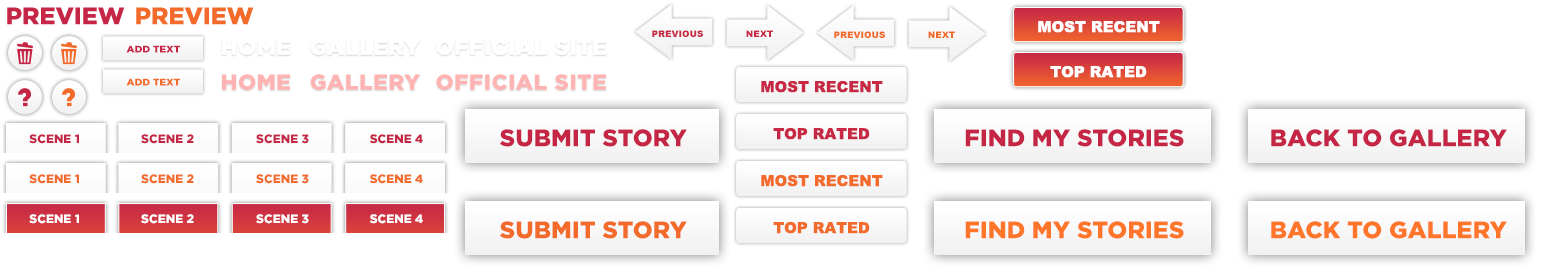
<style>
.page{position:relative;width:1550px;height:275px;background:#ffffff}
.page>*{position:absolute;margin:0}
.t1{font:23.8px "Gotham-Black";color:#c52646}
.t2{font:23.8px "Gotham-Black";color:#f36b2b}
.t3{font:9px "Arial-Black";color:#c72945;text-transform:uppercase}
.t4{font:15.1px "Arial-Black";color:#ffffff;text-transform:uppercase}
.t5{font:22px "Gotham-Black";letter-spacing:0.025em;color:#ffffff;text-transform:uppercase}
.t6{font:9px "Arial-Black";color:#f36b2b;text-transform:uppercase}
.t7{font:9.5px "Gotham-Black";color:#c52646;scale:1.07 1}
.t8{font:9.5px "Gotham-Black";color:#f36b2b;scale:1.07 1}
.t9{font:22px "Gotham-Black";letter-spacing:0.025em;color:#ffb3b3;text-transform:uppercase}
.t10{font:15.1px "Arial-Black";color:#c72945;text-transform:uppercase}
.t11{font:12px "Gotham-Black";color:#c52646}
.t12{font:12px "Gotham-Black";color:#f36b2b}
.t13{font:15.1px "Arial-Black";color:#f36b2b;text-transform:uppercase}
.t14{font:12px "Gotham-Black";color:#ffffff}
.t15{font:23.8px "Gotham-Black";color:#ff762a}
</style>
<div class="page">
<p class="t1" style="left:7px;top:7px;width:118px;height:18px">PREVIEW</p>
<p class="t2" style="left:136px;top:7px;width:118px;height:18px">PREVIEW</p>
<p class="t3" style="left:652px;top:30px;width:51px;height:7px">Previous</p>
<p class="t3" style="left:746px;top:30px;width:27px;height:7px">Next</p>
<p class="t4" style="left:1038px;top:21px;width:122px;height:12px">Most recent</p>
<p class="t5" style="left:222px;top:39px;width:68px;height:16px">HOME</p>
<p class="t5" style="left:310px;top:39px;width:110px;height:16px">GALLERY</p>
<p class="t5" style="left:436px;top:39px;width:170px;height:16px">OFFICIAL SITE</p>
<p class="t6" style="left:834px;top:31px;width:51px;height:7px">Previous</p>
<p class="t6" style="left:928px;top:31px;width:27px;height:7px">Next</p>
<p class="t7" style="left:126px;top:45px;width:54px;height:8px">ADD TEXT</p>
<p class="t8" style="left:126px;top:78px;width:54px;height:8px">ADD TEXT</p>
<p class="t9" style="left:222px;top:74px;width:68px;height:16px">HOME</p>
<p class="t9" style="left:310px;top:74px;width:110px;height:16px">GALLERY</p>
<p class="t9" style="left:436px;top:74px;width:170px;height:16px">OFFICIAL SITE</p>
<p class="t4" style="left:1050px;top:66px;width:97px;height:12px">Top rated</p>
<p class="t10" style="left:761px;top:81px;width:122px;height:12px">Most recent</p>
<p class="t11" style="left:29px;top:134px;width:50px;height:10px">SCENE 1</p>
<p class="t11" style="left:141px;top:134px;width:53px;height:10px">SCENE 2</p>
<p class="t11" style="left:256px;top:134px;width:53px;height:10px">SCENE 3</p>
<p class="t11" style="left:369px;top:134px;width:54px;height:10px">SCENE 4</p>
<p class="t1" style="left:500px;top:129px;width:187px;height:18px">SUBMIT STORY</p>
<p class="t10" style="left:773px;top:128px;width:97px;height:12px">Top rated</p>
<p class="t1" style="left:965px;top:129px;width:219px;height:18px">FIND MY STORIES</p>
<p class="t1" style="left:1271px;top:129px;width:236px;height:18px">BACK TO GALLERY</p>
<p class="t12" style="left:29px;top:174px;width:50px;height:10px">SCENE 1</p>
<p class="t12" style="left:141px;top:174px;width:53px;height:10px">SCENE 2</p>
<p class="t12" style="left:256px;top:174px;width:53px;height:10px">SCENE 3</p>
<p class="t12" style="left:369px;top:174px;width:54px;height:10px">SCENE 4</p>
<p class="t13" style="left:761px;top:175px;width:122px;height:12px">Most recent</p>
<p class="t14" style="left:29px;top:214px;width:50px;height:10px">SCENE 1</p>
<p class="t14" style="left:141px;top:214px;width:53px;height:10px">SCENE 2</p>
<p class="t14" style="left:256px;top:214px;width:53px;height:10px">SCENE 3</p>
<p class="t14" style="left:369px;top:214px;width:54px;height:10px">SCENE 4</p>
<p class="t2" style="left:500px;top:221px;width:187px;height:18px">SUBMIT STORY</p>
<p class="t13" style="left:773px;top:222px;width:97px;height:12px">Top rated</p>
<p class="t15" style="left:965px;top:221px;width:219px;height:18px">FIND MY STORIES</p>
<p class="t15" style="left:1271px;top:221px;width:236px;height:18px">BACK TO GALLERY</p>
</div>
